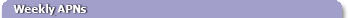
<style>
.page{position:relative;width:348px;height:18px;background:#a29fcb}
.page>*{position:absolute;margin:0}
.t1{font:11px "Tahoma-Bold";color:#ffffff}
</style>
<div class="page">
<p class="t1" style="left:13px;top:4px;width:73px;height:11px">Weekly APNs</p>
</div>
